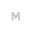
<style>
.page{position:relative;width:32px;height:32px;background:#ffffff}
.page>*{position:absolute;margin:0}
.t1{font:12px "Gilroy-ExtraBold";letter-spacing:0.05em;color:#cccccc}
</style>
<div class="page">
<p class="t1" style="left:11px;top:12px;width:9px;height:9px">M</p>
</div>
